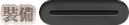
<style>
.page{position:relative;width:129px;height:25px}
.page>*{position:absolute;margin:0}
.t1{font:16px "RyuminPro-ExBold";letter-spacing:-0.08em;color:#84736b;font-weight:bold}
</style>
<div class="page">
<p class="t1" style="left:3px;top:7px;width:31px;height:16px">裝備</p>
</div>
